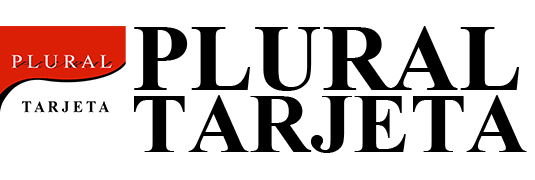
<style>
.page{position:relative;width:535px;height:180px;background:#ffffff}
.page>*{position:absolute;margin:0}
.t1{font:95px "TimesNewRomanPS-BoldMT";color:#000000}
.t2{font:85px "TimesNewRomanPS-BoldMT";color:#000000}
</style>
<div class="page">
<p class="t1" style="left:134px;top:26px;width:385px;height:65px">PLURAL</p>
<p class="t2" style="left:134px;top:95px;width:393px;height:58px">TARJETA</p>
</div>
